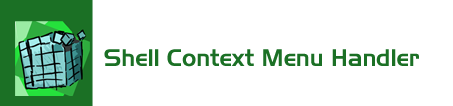
<style>
.page{position:relative;width:453px;height:106px;background:#ffffff}
.page>*{position:absolute;margin:0}
.t1{font:24px "Slicker";color:#1b7025}
</style>
<div class="page">
<p class="t1" style="left:104px;top:49px;width:315px;height:18px">Shell Context Menu Handler</p>
</div>
